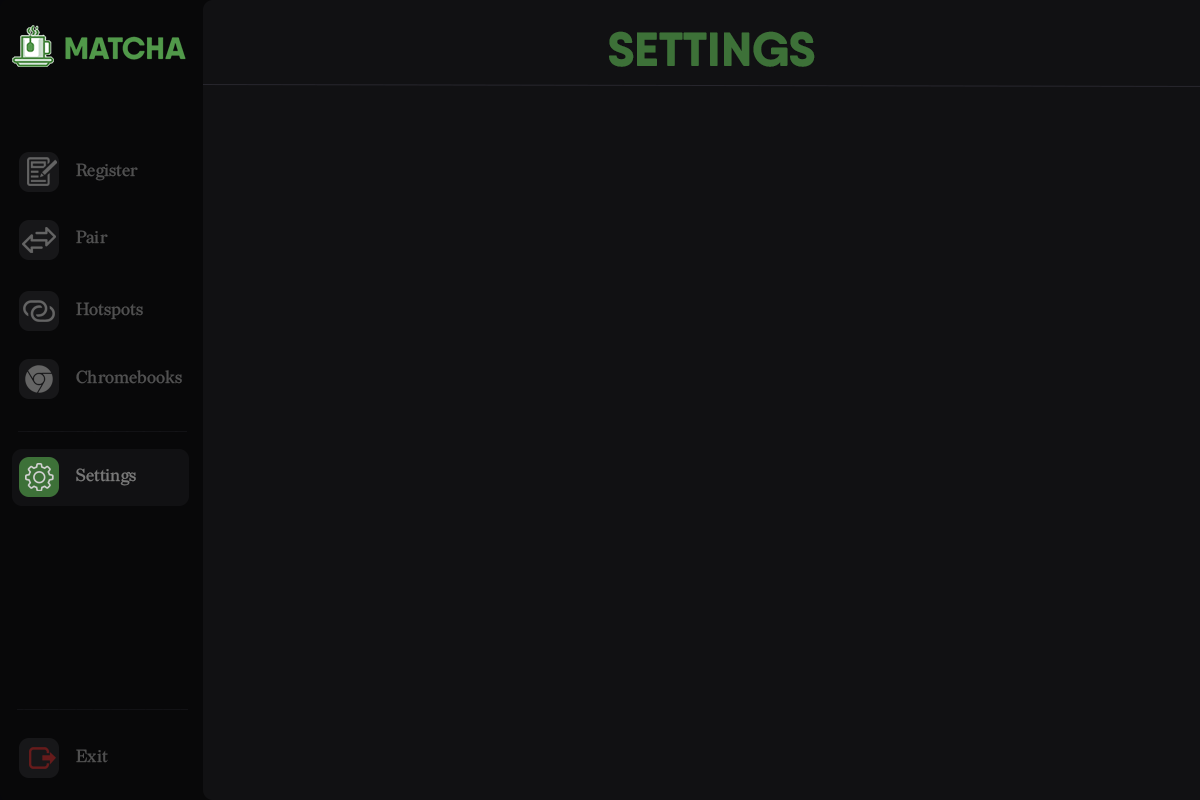
<style>
.page{position:relative;width:1200px;height:800px;background:#111113}
.page>*{position:absolute;margin:0}
.t1{font:48px "QanelasSoftDEMO-ExtraBold";color:#3d7138}
.t2{font:17.4px "Redaction-Regular";color:#505050}
.t3{font:17.4px "Redaction-Regular";color:#787878}
</style>
<div class="page">
<p class="t1" style="left:609px;top:31px;width:206px;height:36px">SETTINGS</p>
<p class="t2" style="left:76px;top:163px;width:62px;height:18px">Register</p>
<p class="t2" style="left:76px;top:230px;width:32px;height:14px">Pair</p>
<p class="t2" style="left:76px;top:302px;width:67px;height:18px">Hotspots</p>
<p class="t2" style="left:76px;top:370px;width:106px;height:14px">Chromebooks</p>
<p class="t3" style="left:76px;top:468px;width:60px;height:18px">Settings</p>
<p class="t2" style="left:76px;top:749px;width:32px;height:14px">Exit</p>
</div>
